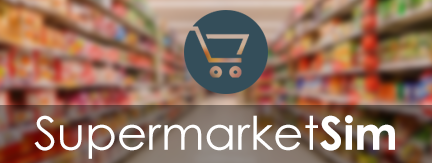
<style>
.page{position:relative;width:432px;height:163px}
.page>*{position:absolute;margin:0}
.t1{font:46.3px "CenturyGothic";color:#ffffff}
.t2{font:46.3px "CenturyGothic-Bold";color:#ffffff}
</style>
<div class="page">
<p class="t1" style="left:34px;top:115px;width:361px;height:44px">Supermarket<span class="t2">Sim</span></p>
</div>
